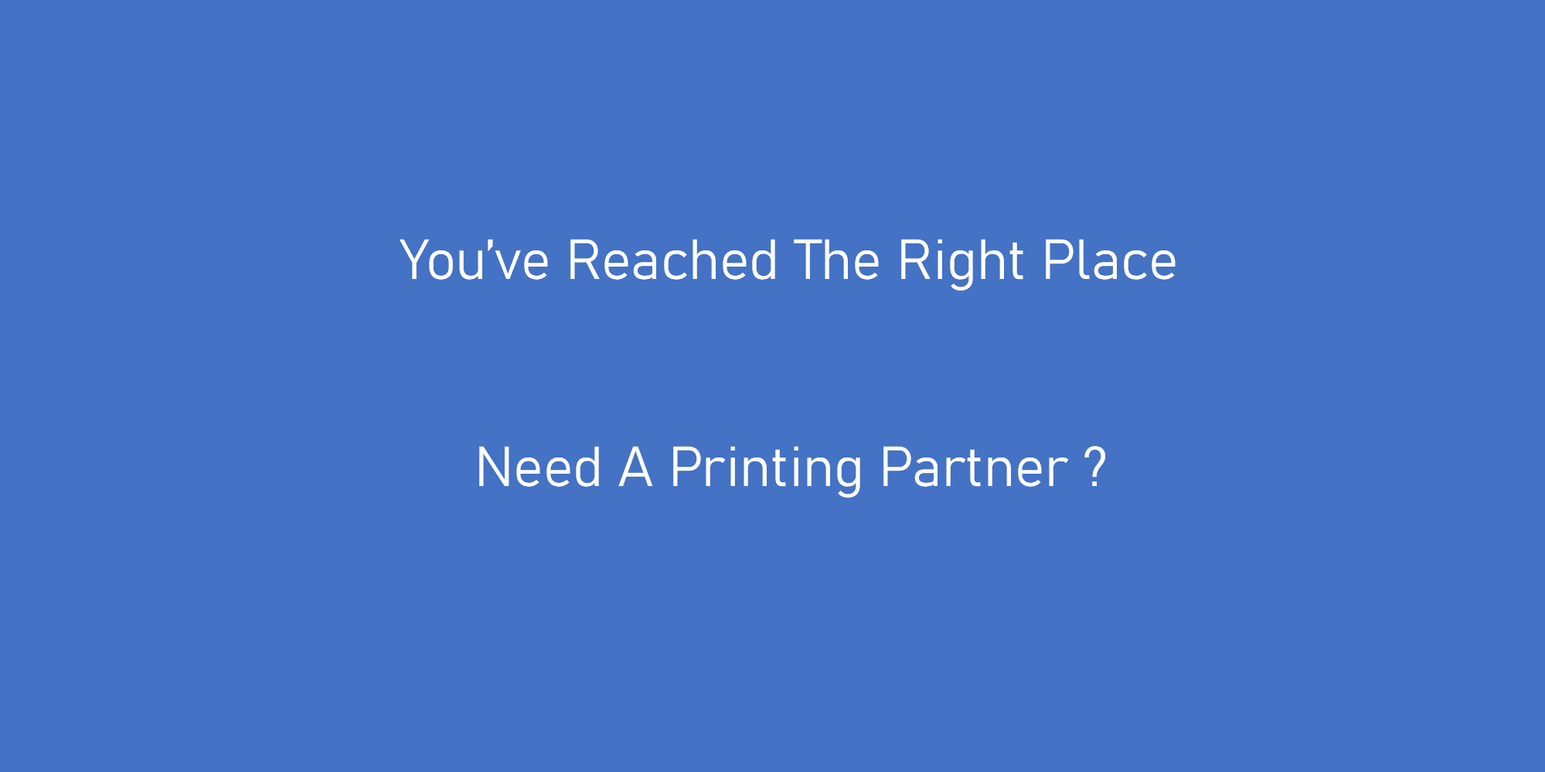
<style>
.page{position:relative;width:1545px;height:772px;background:#4472c4}
.page>*{position:absolute;margin:0}
.t1{font:55.6px "Bahnschrift";color:#ffffff}
</style>
<div class="page">
<p class="t1" style="left:400px;top:239px;width:775px;height:52px">You’ve Reached The Right Place</p>
<p class="t1" style="left:479px;top:446px;width:626px;height:52px">Need A Printing Partner ?</p>
</div>
